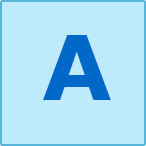
<style>
.page{position:relative;width:146px;height:146px;background:#beebfc}
.page>*{position:absolute;margin:0}
.t1{font:90px "Verdana-Bold";color:#0068c9}
</style>
<div class="page">
<p class="t1" style="left:43px;top:35px;width:68px;height:65px">A</p>
</div>
